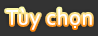
<style>
.page{position:relative;width:98px;height:36px;background:#333333}
.page>*{position:absolute;margin:0}
.t1{font:22px "Corbel";letter-spacing:0.035em;color:#ffffff}
</style>
<div class="page">
<p class="t1" style="left:6px;top:8px;width:86px;height:22px">Tùy chọn</p>
</div>
